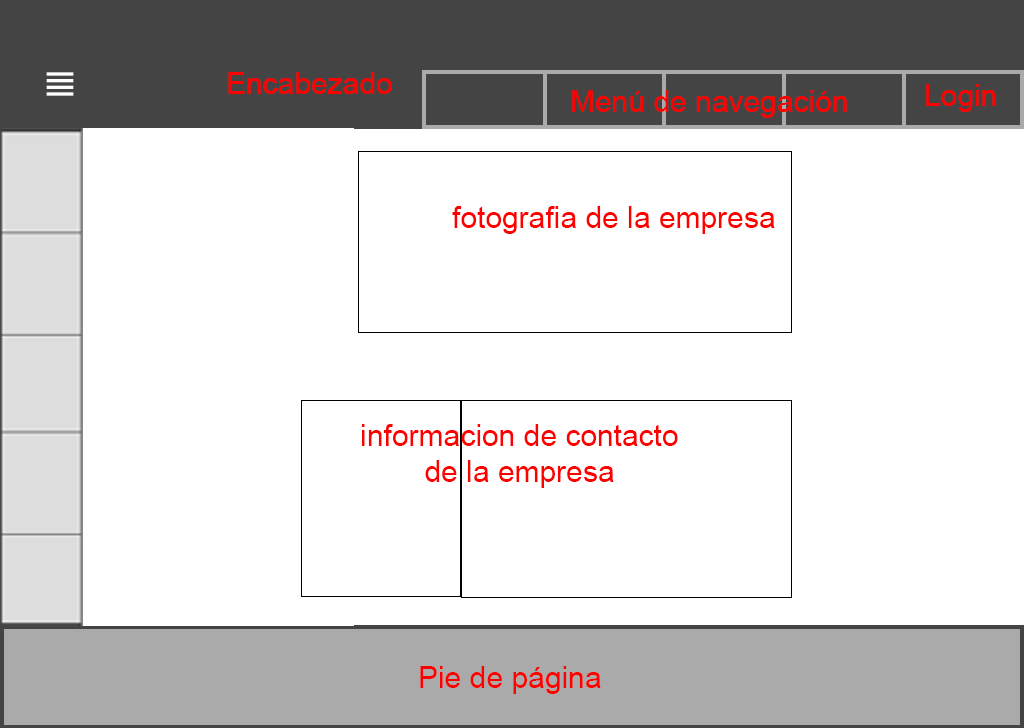
<style>
.page{position:relative;width:1024px;height:728px;background:#ffffff}
.page>*{position:absolute;margin:0}
.t1{font:30px "ArialMT";color:#ff0000}
</style>
<div class="page">
<p class="t1" style="left:228px;top:72px;width:164px;height:22px">Encabezado</p>
<p class="t1" style="left:926px;top:84px;width:70px;height:28px">Login</p>
<p class="t1" style="left:572px;top:90px;width:275px;height:28px">Menú de navegación</p>
<p class="t1" style="left:452px;top:206px;width:323px;height:28px">fotografia de la empresa</p>
<p class="t1" style="left:362px;top:424px;width:316px;height:64px;text-align:center">informacion de contacto <br>de la empresa</p>
<p class="t1" style="left:420px;top:666px;width:181px;height:28px">Pie de página</p>
</div>
